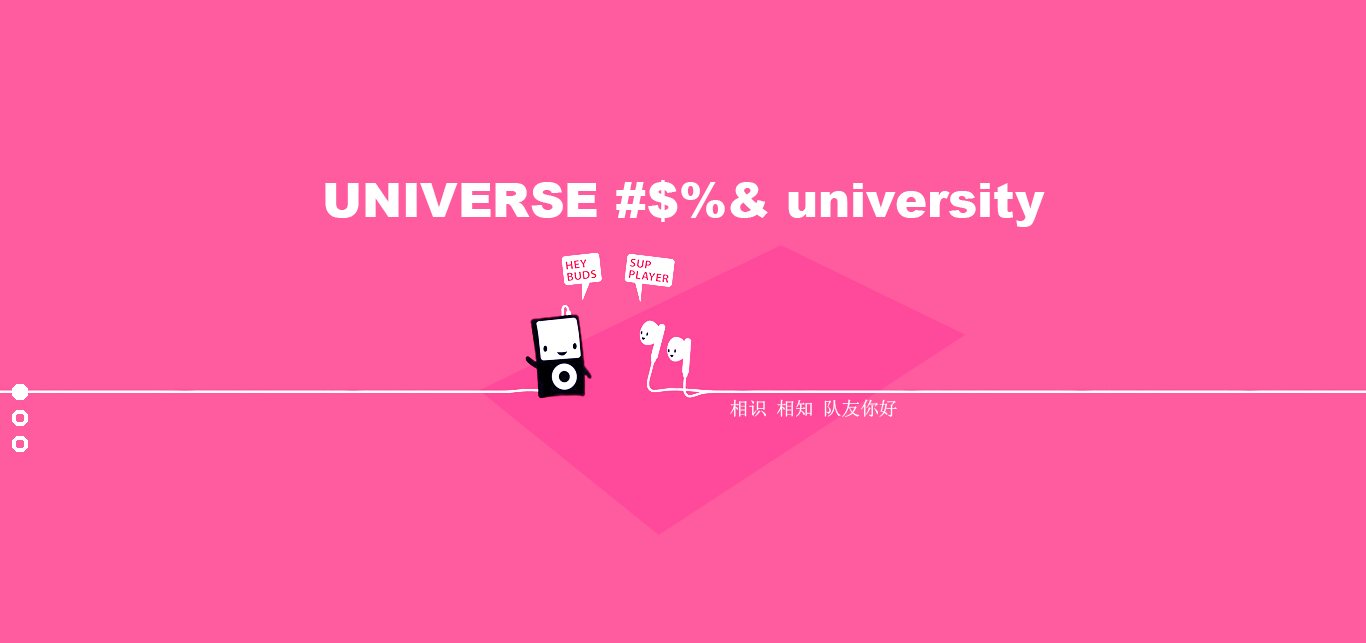
<style>
.page{position:relative;width:1366px;height:643px;background:#ff5ca0}
.page>*{position:absolute;margin:0}
.t1{font:48px "Arial-Black";color:#ffffff}
.t2{font:18.7px "SimSun";color:#ffffff}
</style>
<div class="page">
<p class="t1" style="left:325px;top:180px;width:720px;height:47px">UNIVERSE #$%&amp; university</p>
<p class="t2" style="left:730px;top:399px;width:167px;height:18px">相识 相知 队友你好</p>
</div>
